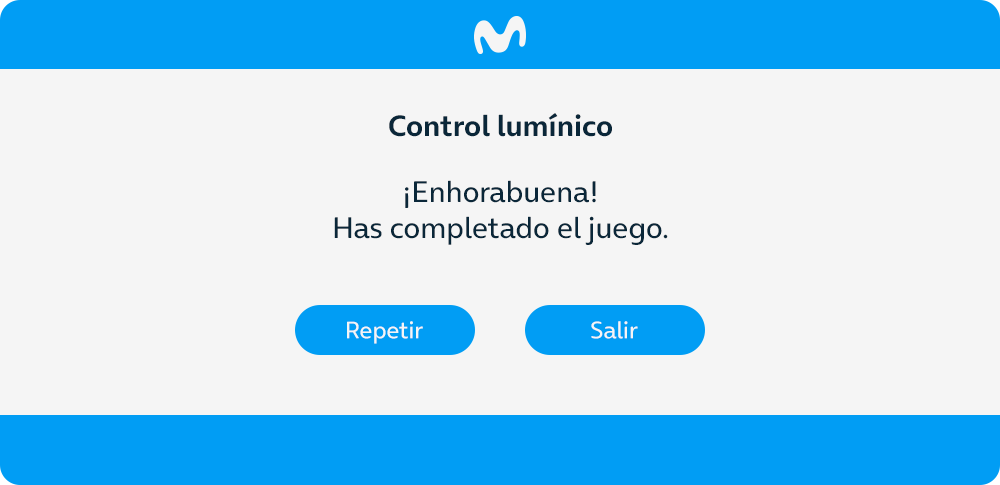
<style>
.page{position:relative;width:1000px;height:485px;background:#f5f5f5}
.page>*{position:absolute;margin:0}
.t1{font:30px "OnAir-Bold";color:#0a2739}
.t2{font:30px "OnAir-Regular";color:#0a2739}
.t3{font:24px "OnAir-Regular";color:#f5f5f5}
</style>
<div class="page">
<p class="t1" style="left:389px;top:113px;width:223px;height:24px">Control lumínico</p>
<p class="t2" style="left:334px;top:180px;width:334px;height:65px;text-align:center">¡Enhorabuena!<br>Has completado el juego.</p>
<p class="t3" style="left:347px;top:321px;width:76px;height:23px">Repetir</p>
<p class="t3" style="left:591px;top:321px;width:47px;height:18px">Salir</p>
</div>
